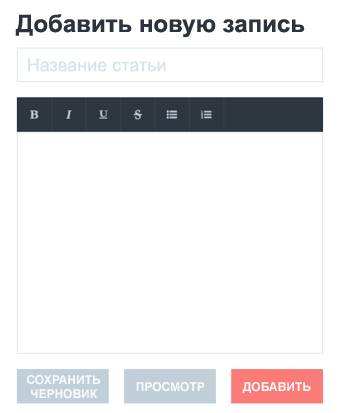
<style>
.page{position:relative;width:337px;height:413px;background:#ffffff}
.page>*{position:absolute;margin:0}
.t1{font:24px "Arial-BoldMT";color:#2b343e}
.t2{font:18px "ArialMT";color:#d8e3e9}
.t3{font:12px "Arial-BoldMT";color:#fbfcfd}
</style>
<div class="page">
<p class="t1" style="left:15px;top:14px;width:290px;height:24px">Добавить новую запись</p>
<p class="t2" style="left:28px;top:58px;width:138px;height:14px">Название статьи</p>
<p class="t3" style="left:27px;top:375px;width:74px;height:24px;text-align:center">СОХРАНИТЬ<br>ЧЕРНОВИК</p>
<p class="t3" style="left:136px;top:382px;width:69px;height:10px">ПРОСМОТР</p>
<p class="t3" style="left:242px;top:382px;width:69px;height:11px">ДОБАВИТЬ</p>
</div>
